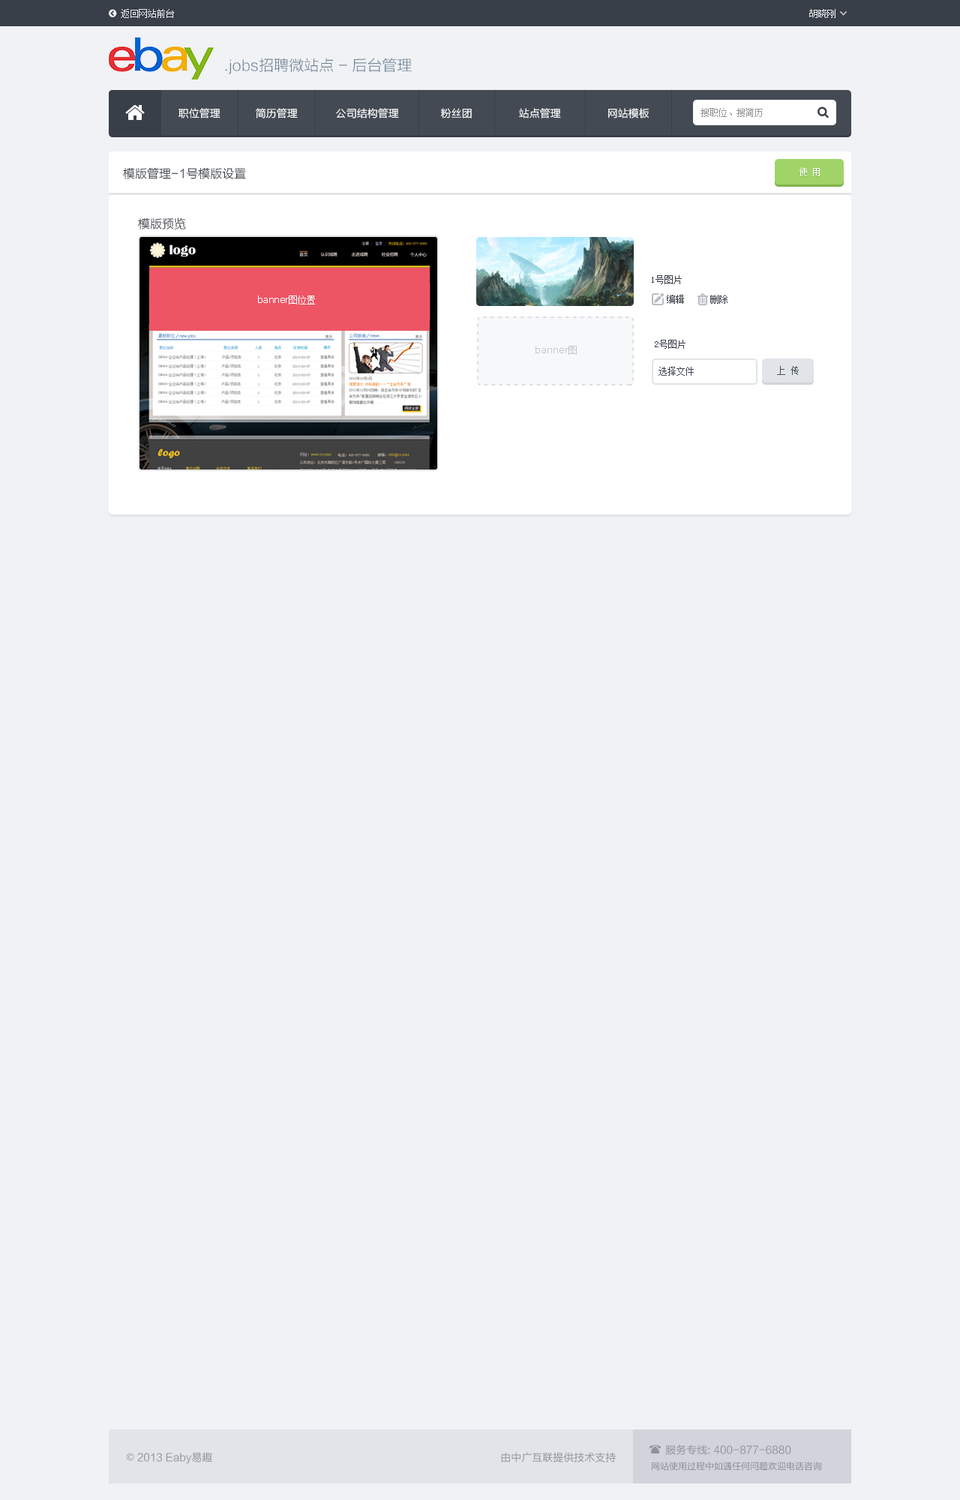
<style>
.page{position:relative;width:960px;height:1500px;background:#f0f2f5}
.page>*{position:absolute;margin:0}
.t1{font:9px "SimSun";color:#eceef0}
.t2{font:15px "FZLTXHK";color:#6c8092}
.t3{font:10.5px "FZLTXHK";color:#ffffff}
.t4{font:9px "SimSun";color:#959596}
.t5{font:12px "FZLTXHK";color:#393f48}
.t6{font:9px "SimSun";color:#ffffff}
.t7{font:9px "SimSun";color:#393f48}
.t8{font:9px "Verdana";color:#ffffff}
.t9{font:9px "Verdana";color:#c3c7cc}
.t10{font:9px "SimSun";color:#c3c7cc}
.t11{font:9px "SimSun";color:#434a54}
.t12{font:10.5px "FZLTHK--GBK1-0";color:#8f9399}
.t13{font:10.5px "AdobeHeitiStd-Regular";color:#8f9399}
.t14{font:9px "FZLTHJW--GB1-0";color:#868990}
</style>
<div class="page">
<p class="t1" style="left:121px;top:9px;width:53px;height:9px">返回网站前台</p>
<p class="t1" style="left:809px;top:9px;width:27px;height:9px">胡晓刚</p>
<p class="t2" style="left:225px;top:58px;width:187px;height:16px">.jobs招聘微站点 - 后台管理</p>
<p class="t3" style="left:178px;top:108px;width:42px;height:10px">职位管理</p>
<p class="t3" style="left:256px;top:108px;width:42px;height:10px">简历管理</p>
<p class="t3" style="left:336px;top:108px;width:63px;height:10px">公司结构管理</p>
<p class="t3" style="left:441px;top:108px;width:31px;height:10px">粉丝团</p>
<p class="t3" style="left:519px;top:108px;width:42px;height:10px">站点管理</p>
<p class="t3" style="left:608px;top:108px;width:41px;height:10px">网站模板</p>
<p class="t4" style="left:700px;top:108px;width:63px;height:9px">搜职位、搜简历</p>
<p class="t5" style="left:123px;top:167px;width:123px;height:12px">模版管理-1号模版设置</p>
<p class="t6" style="left:799px;top:167px;width:21px;height:9px">使 用</p>
<p class="t5" style="left:138px;top:218px;width:48px;height:12px">模版预览</p>
<p class="t7" style="left:652px;top:275px;width:30px;height:9px">1号图片</p>
<p class="t8" style="left:258px;top:296px;width:57px;height:8px">banner<span class="t6">图位置</span></p>
<p class="t7" style="left:667px;top:295px;width:17px;height:9px">编辑</p>
<p class="t7" style="left:710px;top:295px;width:18px;height:9px">删除</p>
<p class="t7" style="left:655px;top:340px;width:31px;height:9px">2号图片</p>
<p class="t9" style="left:536px;top:346px;width:41px;height:9px">banner<span class="t10">图</span></p>
<p class="t11" style="left:777px;top:366px;width:22px;height:9px">上 传</p>
<p class="t11" style="left:658px;top:367px;width:36px;height:9px">选择文件</p>
<p class="t12" style="left:665px;top:1444px;width:126px;height:11px">服务专线: 400-877-6880</p>
<p class="t12" style="left:126px;top:1452px;width:86px;height:12px"><span class="t13">©</span> 2013 Eaby易趣</p>
<p class="t12" style="left:501px;top:1452px;width:115px;height:10px">由中广互联提供技术支持</p>
<p class="t14" style="left:652px;top:1462px;width:170px;height:9px">网站使用过程中如遇任何问题欢迎电话咨询</p>
</div>
